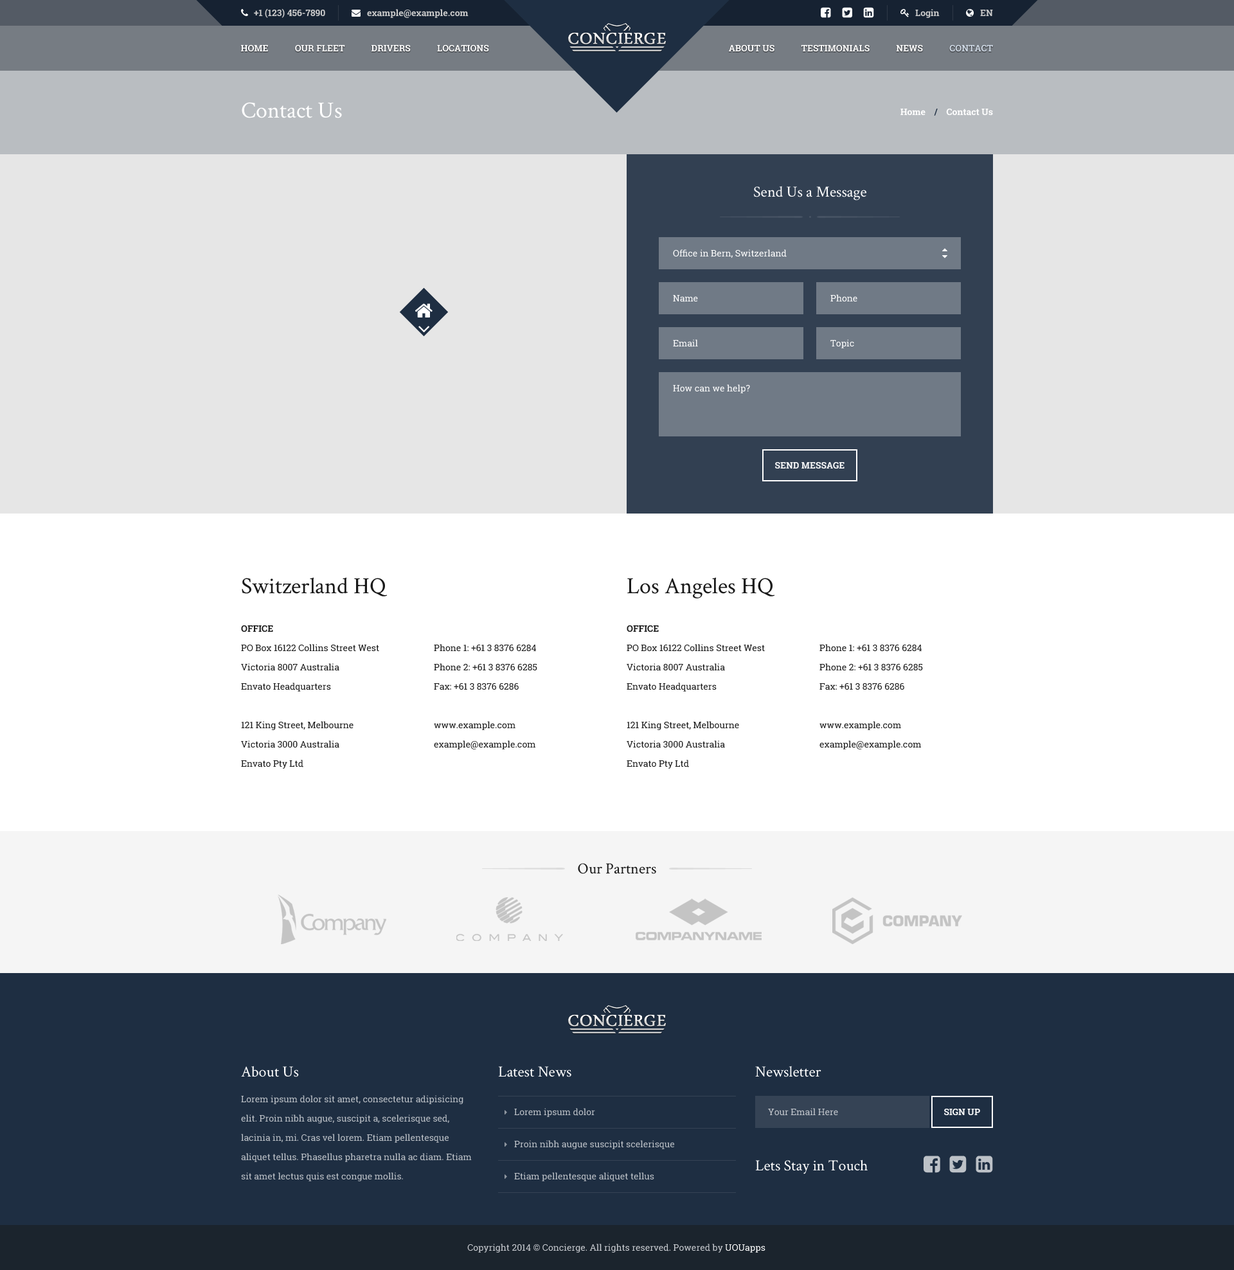
<style>
.page{position:relative;width:1234px;height:1270px;background:#ffffff}
.page>*{position:absolute;margin:0}
.t1{font:9px "RobotoSlab-Bold";color:#cccccc}
.t2{font:9px "RobotoSlab-Bold";color:#ffffff;text-transform:uppercase}
.t3{font:9px "RobotoSlab-Bold";color:#d0dae6;text-transform:uppercase}
.t4{font:23.1px "CrimsonText-Roman";color:#ffffff}
.t5{font:9px "RobotoSlab-Bold";color:#ffffff}
.t6{font:9px "RobotoSlab-Bold";color:#1e2e42}
.t7{font:15.4px "CrimsonText-Roman";color:#ffffff}
.t8{font:9px "RobotoSlab-Regular";color:#ffffff}
.t9{font:23.1px "CrimsonText-Roman";color:#1a1a1a}
.t10{font:9px/19.3px "RobotoSlab-Regular";color:#1a1a1a}
.t11{font:9px/19.3px "RobotoSlab-Bold";color:#1a1a1a;text-transform:uppercase}
.t12{font:15.4px "CrimsonText-Roman";color:#1a1a1a}
.t13{font:9px/19.3px "RobotoSlab-Regular";color:#bcc1c7}
.t14{font:9px/32.1px "RobotoSlab-Regular";color:#bcc1c7}
.t15{font:9px "RobotoSlab-Regular";color:#c3c7cd}
.t16{font:9px "RobotoSlab-Regular";color:#c8cbd0}
</style>
<div class="page">
<p class="t1" style="left:254px;top:8px;width:71px;height:10px">+1 (123) 456-7890</p>
<p class="t1" style="left:367px;top:9px;width:102px;height:9px">example@example.com</p>
<p class="t1" style="left:915px;top:9px;width:25px;height:9px">Login</p>
<p class="t1" style="left:980px;top:10px;width:13px;height:6px">EN</p>
<p class="t2" style="left:241px;top:44px;width:248px;height:8px">Home            Our Fleet            Drivers            Locations</p>
<p class="t2" style="left:729px;top:44px;width:264px;height:8px">About Us            Testimonials            News            <span class="t3">Contact</span></p>
<p class="t4" style="left:242px;top:102px;width:100px;height:16px">Contact Us</p>
<p class="t5" style="left:901px;top:108px;width:92px;height:8px">Home    <span class="t6">/</span>    Contact Us</p>
<p class="t7" style="left:754px;top:186px;width:113px;height:15px">Send Us a Message</p>
<p class="t8" style="left:673px;top:249px;width:114px;height:9px">Office in Bern, Switzerland</p>
<p class="t8" style="left:673px;top:295px;width:25px;height:7px">Name</p>
<p class="t8" style="left:831px;top:294px;width:27px;height:8px">Phone</p>
<p class="t8" style="left:673px;top:339px;width:25px;height:8px">Email</p>
<p class="t8" style="left:831px;top:339px;width:23px;height:9px">Topic</p>
<p class="t8" style="left:673px;top:384px;width:77px;height:9px">How can we help?</p>
<p class="t2" style="left:775px;top:462px;width:70px;height:7px">Send Message</p>
<p class="t9" style="left:242px;top:577px;width:146px;height:20px">Switzerland HQ</p>
<p class="t9" style="left:627px;top:577px;width:148px;height:21px">Los Angeles HQ</p>
<p class="t10" style="left:241px;top:625px;width:138px;height:144px"><span class="t11">Office<br></span>PO Box 16122 Collins Street West<br>Victoria 8007 Australia<br>Envato Headquarters<br><br>121 King Street, Melbourne<br>Victoria 3000 Australia<br>Envato Pty Ltd</p>
<p class="t10" style="left:627px;top:625px;width:138px;height:144px"><span class="t11">Office<br></span>PO Box 16122 Collins Street West<br>Victoria 8007 Australia<br>Envato Headquarters<br><br>121 King Street, Melbourne<br>Victoria 3000 Australia<br>Envato Pty Ltd</p>
<p class="t10" style="left:434px;top:644px;width:103px;height:106px">Phone 1: +61 3 8376 6284<br>Phone 2: +61 3 8376 6285<br>Fax: +61 3 8376 6286<br><br>www.example.com<br>example@example.com</p>
<p class="t10" style="left:820px;top:644px;width:103px;height:106px">Phone 1: +61 3 8376 6284<br>Phone 2: +61 3 8376 6285<br>Fax: +61 3 8376 6286<br><br>www.example.com<br>example@example.com</p>
<p class="t12" style="left:578px;top:863px;width:78px;height:11px">Our Partners</p>
<p class="t7" style="left:241px;top:1066px;width:58px;height:11px">About Us</p>
<p class="t7" style="left:498px;top:1066px;width:74px;height:11px">Latest News</p>
<p class="t7" style="left:755px;top:1066px;width:67px;height:11px">Newsletter</p>
<p class="t13" style="left:241px;top:1095px;width:231px;height:87px">Lorem ipsum dolor sit amet, consectetur adipisicing elit. Proin nibh augue, suscipit a, scelerisque sed, lacinia in, mi. Cras vel lorem. Etiam pellentesque aliquet tellus. Phasellus pharetra nulla ac diam. Etiam sit amet lectus quis est congue mollis.</p>
<p class="t14" style="left:514px;top:1108px;width:160px;height:74px">Lorem ipsum dolor<br>Proin nibh augue suscipit scelerisque<br>Etiam pellentesque aliquet tellus</p>
<p class="t15" style="left:768px;top:1108px;width:70px;height:8px">Your Email Here</p>
<p class="t2" style="left:944px;top:1108px;width:36px;height:8px">Sign Up</p>
<p class="t7" style="left:755px;top:1160px;width:113px;height:14px">Lets Stay in Touch</p>
<p class="t16" style="left:467px;top:1244px;width:299px;height:9px">Copyright 2014 © Concierge. All rights reserved. Powered by <span class="t8">UOUapps</span></p>
</div>
